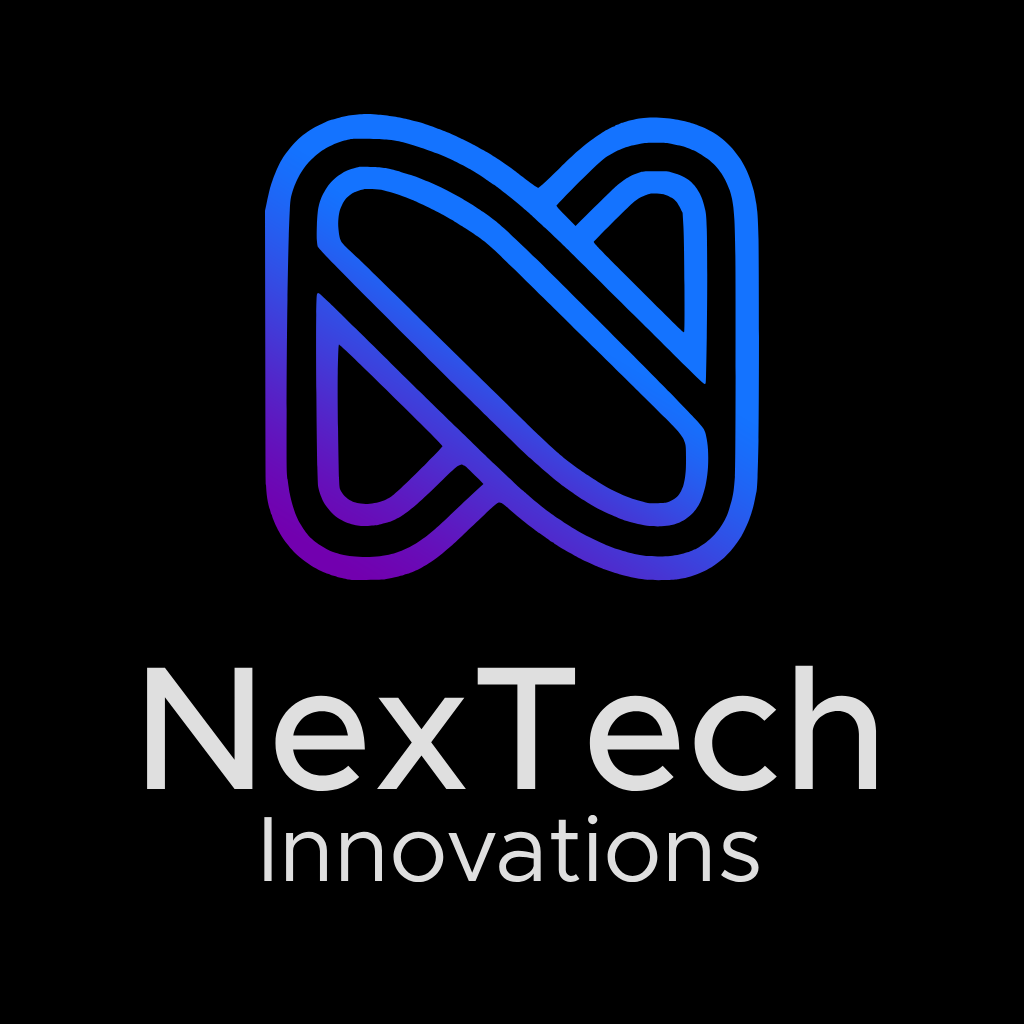
<style>
.page{position:relative;width:1024px;height:1024px;background:#000000}
.page>*{position:absolute;margin:0}
.t1{font:176.3px "Metropolis-Medium";color:#dfdfdf}
.t2{font:93px "Metropolis-Regular";color:#dfdfdf}
</style>
<div class="page">
<p class="t1" style="left:147px;top:665px;width:730px;height:126px">NexTech</p>
<p class="t2" style="left:264px;top:814px;width:495px;height:69px">Innovations</p>
</div>
